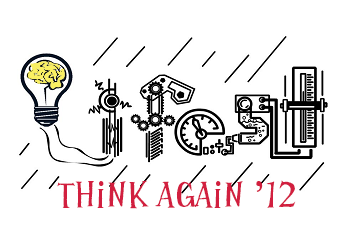
<style>
.page{position:relative;width:342px;height:225px;background:#ffffff}
.page>*{position:absolute;margin:0}
.t1{font:40px "HPPSG";color:#d21f3f}
</style>
<div class="page">
<p class="t1" style="left:57px;top:180px;width:239px;height:29px">Think Again ’12</p>
</div>
